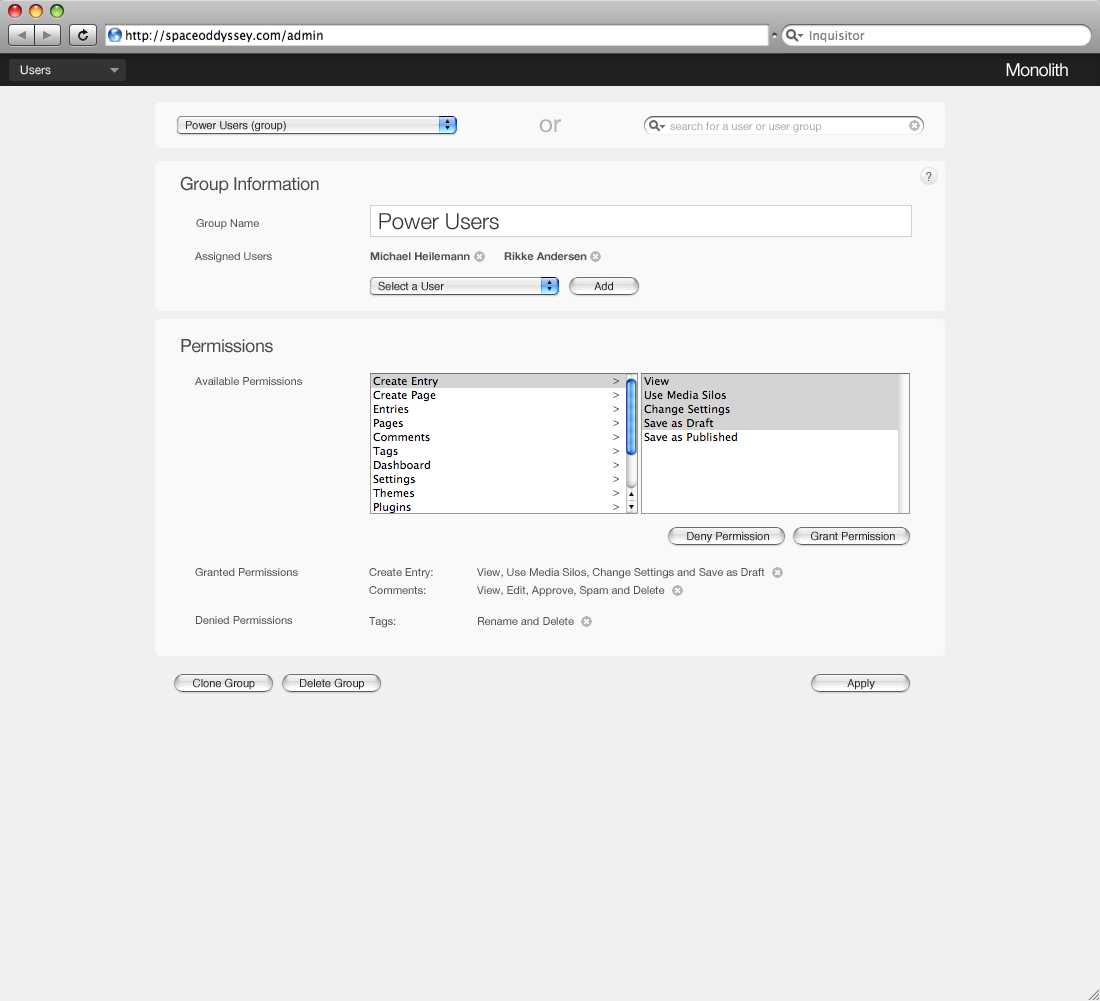
<style>
.page{position:relative;width:1100px;height:1001px;background:#f0f0f0}
.page>*{position:absolute;margin:0}
.t1{font:12px "HelveticaNeue";color:#ffffff}
.t2{font:18px "HelveticaNeue";letter-spacing:-0.05em;color:#ffffff}
.t3{font:11px "Helvetica";color:#242424}
.t4{font:24px "HelveticaNeue";color:#b4b4b4}
.t5{font:11px "HelveticaNeue";color:#ababab}
.t6{font:12px "Helvetica";color:#767676}
.t7{font:18px "HelveticaNeue";letter-spacing:-0.025em;color:#4a4a4a}
.t8{font:11px "HelveticaNeue";color:#525151}
.t9{font:22px "HelveticaNeue-Light";color:#333333}
.t10{font:11px "HelveticaNeue-Bold";color:#525151}
.t11{font:11px/18px "HelveticaNeue";color:#525151}
</style>
<div class="page">
<p class="t1" style="left:20px;top:65px;width:31px;height:10px">Users</p>
<p class="t2" style="left:1006px;top:63px;width:62px;height:14px">Monolith</p>
<p class="t3" style="left:186px;top:121px;width:100px;height:11px">Power Users (group)</p>
<p class="t4" style="left:539px;top:119px;width:22px;height:14px">or</p>
<p class="t5" style="left:670px;top:122px;width:152px;height:11px">search for a user or user group</p>
<p class="t6" style="left:926px;top:172px;width:6px;height:9px">?</p>
<p class="t7" style="left:180px;top:176px;width:139px;height:18px">Group Information</p>
<p class="t8" style="left:196px;top:219px;width:63px;height:11px">Group Name</p>
<p class="t9" style="left:379px;top:213px;width:120px;height:17px">Power Users</p>
<p class="t8" style="left:195px;top:252px;width:77px;height:11px">Assigned Users</p>
<p class="t10" style="left:370px;top:252px;width:100px;height:9px">Michael Heilemann</p>
<p class="t10" style="left:504px;top:252px;width:83px;height:9px">Rikke Andersen</p>
<p class="t3" style="left:378px;top:281px;width:66px;height:10px">Select a User</p>
<p class="t3" style="left:594px;top:282px;width:19px;height:9px">Add</p>
<p class="t7" style="left:181px;top:339px;width:92px;height:14px">Permissions</p>
<p class="t8" style="left:195px;top:377px;width:107px;height:8px">Available Permissions</p>
<p class="t3" style="left:687px;top:532px;width:82px;height:11px">Deny Permission</p>
<p class="t3" style="left:811px;top:531px;width:84px;height:10px">Grant Permission</p>
<p class="t8" style="left:195px;top:568px;width:103px;height:8px">Granted Permissions</p>
<p class="t11" style="left:369px;top:568px;width:396px;height:29px">Create Entry:  View, Use Media Silos, Change Settings and Save as Draft<br>Comments:  View, Edit, Approve, Spam and Delete</p>
<p class="t8" style="left:196px;top:616px;width:97px;height:8px">Denied Permissions</p>
<p class="t8" style="left:369px;top:617px;width:205px;height:11px">Tags:   Rename and Delete</p>
<p class="t3" style="left:193px;top:678px;width:62px;height:12px">Clone Group</p>
<p class="t3" style="left:300px;top:678px;width:64px;height:12px">Delete Group</p>
<p class="t3" style="left:847px;top:679px;width:28px;height:11px">Apply</p>
</div>
